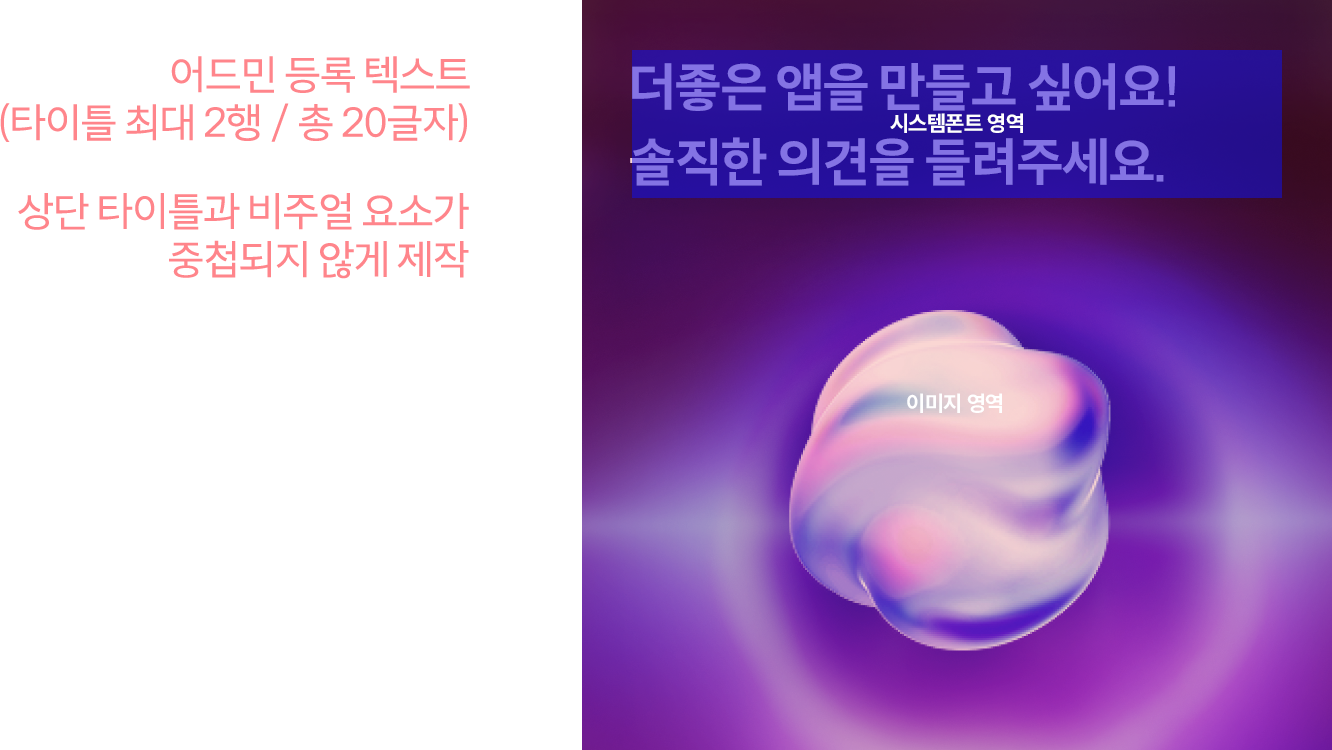
<style>
.page{position:relative;width:1332px;height:750px;background:#ffffff}
.page>*{position:absolute;margin:0}
.t1{font:40px/48px "Happiness-Sans-Regular";letter-spacing:-0.03em;color:#ff858b}
.t2{font:52px/75px "HappinessSansVF-Bold";letter-spacing:-0.035em;color:#8473e4}
.t3{font:22px "Pretendard-Bold";letter-spacing:-0.02em;color:#ffffff}
</style>
<div class="page">
<p class="t1" style="left:0px;top:56px;width:470px;height:86px;text-align:right">어드민 등록 텍스트<br>(타이틀 최대 2행 / 총 20글자)</p>
<p class="t2" style="left:630px;top:63px;width:545px;height:123px">더좋은 앱을 만들고 싶어요!<br>솔직한 의견을 들려주세요.</p>
<p class="t3" style="left:890px;top:113px;width:133px;height:20px">시스템폰트 영역</p>
<p class="t1" style="left:18px;top:193px;width:451px;height:86px;text-align:right">상단 타이틀과 비주얼 요소가<br>중첩되지 않게 제작</p>
<p class="t3" style="left:907px;top:393px;width:95px;height:20px">이미지 영역</p>
</div>
